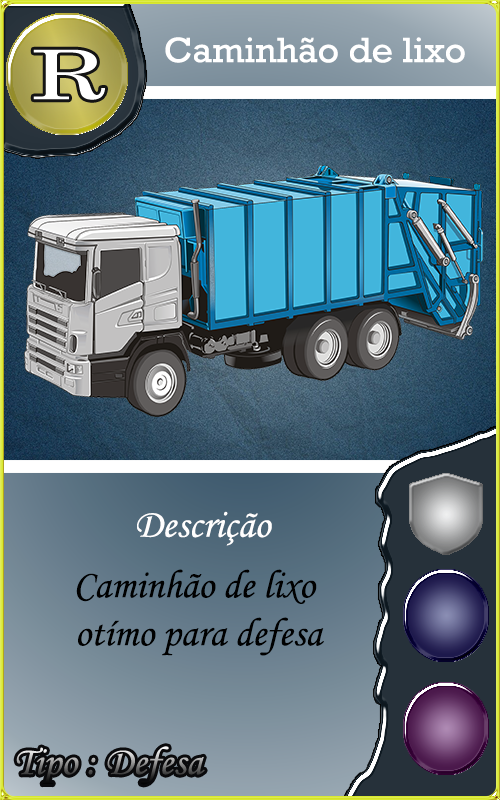
<style>
.page{position:relative;width:500px;height:800px}
.page>*{position:absolute;margin:0}
.t1{font:35.9px "Rockwell";color:#ffffff;scale:1.04 1}
.t2{font:40px "MonotypeCorsiva";color:#fffefe}
.t3{font:40px "MonotypeCorsiva";color:#000000}
</style>
<div class="page">
<p class="t1" style="left:165px;top:37px;width:300px;height:26px">Caminhão de lixo</p>
<p class="t2" style="left:137px;top:511px;width:135px;height:35px">Descrição</p>
<p class="t3" style="left:76px;top:569px;width:248px;height:87px;text-align:center">Caminhão de lixo <br>otímo para defesa</p>
</div>
